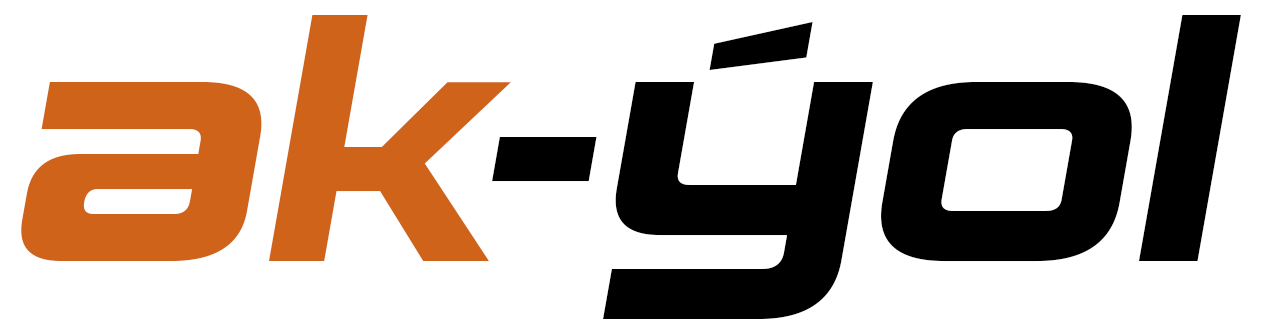
<style>
.page{position:relative;width:1266px;height:333px;background:#ffffff}
.page>*{position:absolute;margin:0}
.t1{font:300px "Korataki";color:#000000;font-style:italic}
.t2{font:300px "Korataki";color:#ce6319;font-style:italic}
</style>
<div class="page">
<p class="t1" style="left:21px;top:15px;width:1220px;height:304px"><span class="t2">ak</span>-ýol</p>
</div>
